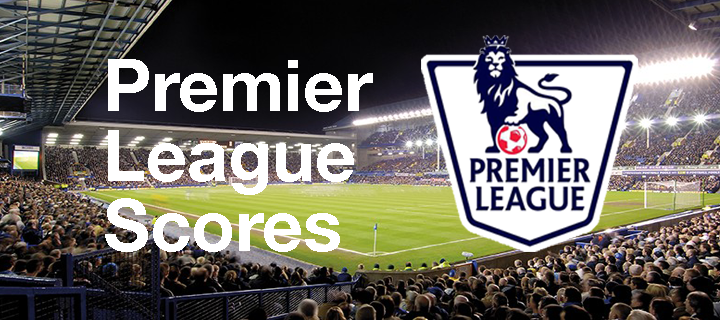
<style>
.page{position:relative;width:720px;height:320px}
.page>*{position:absolute;margin:0}
.t1{font:72px/70px "HelveticaNeue-Bold";color:#ffffff}
</style>
<div class="page">
<p class="t1" style="left:105px;top:59px;width:268px;height:193px">Premier <br>League <br>Scores</p>
</div>
